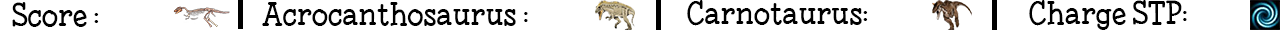
<style>
.page{position:relative;width:1280px;height:30px;background:#ffffff}
.page>*{position:absolute;margin:0}
.t1{font:30px "Fonesia";color:#000000}
</style>
<div class="page">
<p class="t1" style="left:12px;top:2px;width:87px;height:25px">Score :</p>
<p class="t1" style="left:262px;top:2px;width:266px;height:24px">Acrocanthosaurus :</p>
<p class="t1" style="left:687px;top:0px;width:181px;height:26px">Carnotaurus:</p>
<p class="t1" style="left:1029px;top:0px;width:158px;height:30px">Charge STP:</p>
</div>
